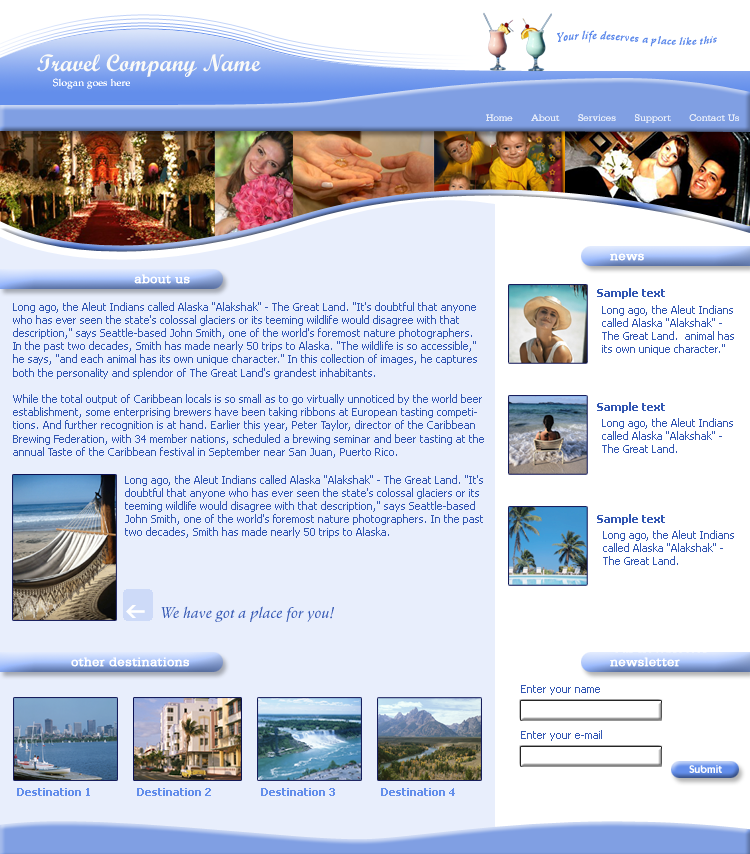
<style>
.page{position:relative;width:750px;height:854px;background:#e8eefc}
.page>*{position:absolute;margin:0}
.t1{font:11px "SchneidlerBT-MediumItalic";letter-spacing:0.02em;color:#5b88ea}
.t2{font:24px "ScriptMTBold";color:#fafaf7}
.t3{font:10px "Palatino-Roman";letter-spacing:0.02em;color:#ffffff}
.t4{font:10px "SerifaBT-Roman";color:#e6ecf9}
.t5{font:13px "SerifaBT-Roman";letter-spacing:0.02em;color:#ffffff;font-weight:bold}
.t6{font:11px "Tahoma-Bold";color:#3357b3}
.t7{font:11px "Tahoma";color:#3357b3}
.t8{font:15px "SchneidlerBT-MediumItalic";color:#3357b3}
.t9{font:11px "PerformaBookSSKSemiBold";color:#ffffff}
.t10{font:11px "Tahoma-Bold";color:#638eeb}
</style>
<div class="page">
<p class="t1" style="left:557px;top:30px;width:160px;height:17px">Your life deserves a place like this</p>
<p class="t2" style="left:37px;top:54px;width:224px;height:23px">Travel Company Name</p>
<p class="t3" style="left:53px;top:78px;width:77px;height:11px">Slogan goes here</p>
<p class="t4" style="left:486px;top:114px;width:253px;height:9px">Home       About       Services       Support       Contact Us</p>
<p class="t5" style="left:610px;top:253px;width:34px;height:8px">news</p>
<p class="t5" style="left:134px;top:274px;width:56px;height:10px">about us</p>
<p class="t6" style="left:597px;top:288px;width:68px;height:11px">Sample text</p>
<p class="t7" style="left:13px;top:302px;width:471px;height:156px">Long ago, the Aleut Indians called Alaska "Alakshak" - The Great Land. "It's doubtful that anyone who has ever seen the state's colossal glaciers or its teeming wildlife would disagree with that description," says Seattle-based John Smith, one of the world's foremost nature photographers. In the past two decades, Smith has made nearly 50 trips to Alaska. "The wildlife is so accessible," he says, "and each animal has its own unique character." In this collection of images, he captures both the personality and splendor of The Great Land's grandest inhabitants.<br><br>While the total output of Caribbean locals is so small as to go virtually unnoticed by the world beer establishment, some enterprising brewers have been taking ribbons at European tasting competitions. And further recognition is at hand. Earlier this year, Peter Taylor, director of the Caribbean Brewing Federation, with 34 member nations, scheduled a brewing seminar and beer tasting at the annual Taste of the Caribbean festival in September near San Juan, Puerto Rico.</p>
<p class="t7" style="left:602px;top:305px;width:132px;height:50px">Long ago, the Aleut Indians called Alaska "Alakshak" - The Great Land.  animal has its own unique character."</p>
<p class="t6" style="left:597px;top:402px;width:68px;height:11px">Sample text</p>
<p class="t7" style="left:602px;top:418px;width:131px;height:35px">Long ago, the Aleut Indians called Alaska "Alakshak" - The Great Land.</p>
<p class="t7" style="left:125px;top:475px;width:358px;height:63px">Long ago, the Aleut Indians called Alaska "Alakshak" - The Great Land. "It's doubtful that anyone who has ever seen the state's colossal glaciers or its teeming wildlife would disagree with that description," says Seattle-based John Smith, one of the world's foremost nature photographers. In the past two decades, Smith has made nearly 50 trips to Alaska.</p>
<p class="t6" style="left:597px;top:514px;width:68px;height:11px">Sample text</p>
<p class="t7" style="left:603px;top:530px;width:131px;height:35px">Long ago, the Aleut Indians called Alaska "Alakshak" - The Great Land.</p>
<p class="t8" style="left:161px;top:606px;width:173px;height:16px">We have got a place for you!</p>
<p class="t5" style="left:71px;top:657px;width:118px;height:10px">other destinations</p>
<p class="t5" style="left:610px;top:657px;width:70px;height:10px">newsletter</p>
<p class="t7" style="left:521px;top:685px;width:79px;height:10px">Enter your name</p>
<p class="t7" style="left:521px;top:730px;width:81px;height:11px">Enter your e-mail</p>
<p class="t9" style="left:689px;top:765px;width:33px;height:8px">Submit</p>
<p class="t10" style="left:17px;top:788px;width:73px;height:8px">Destination 1</p>
<p class="t10" style="left:137px;top:788px;width:74px;height:8px">Destination 2</p>
<p class="t10" style="left:261px;top:788px;width:74px;height:8px">Destination 3</p>
<p class="t10" style="left:381px;top:788px;width:74px;height:8px">Destination 4</p>
</div>
